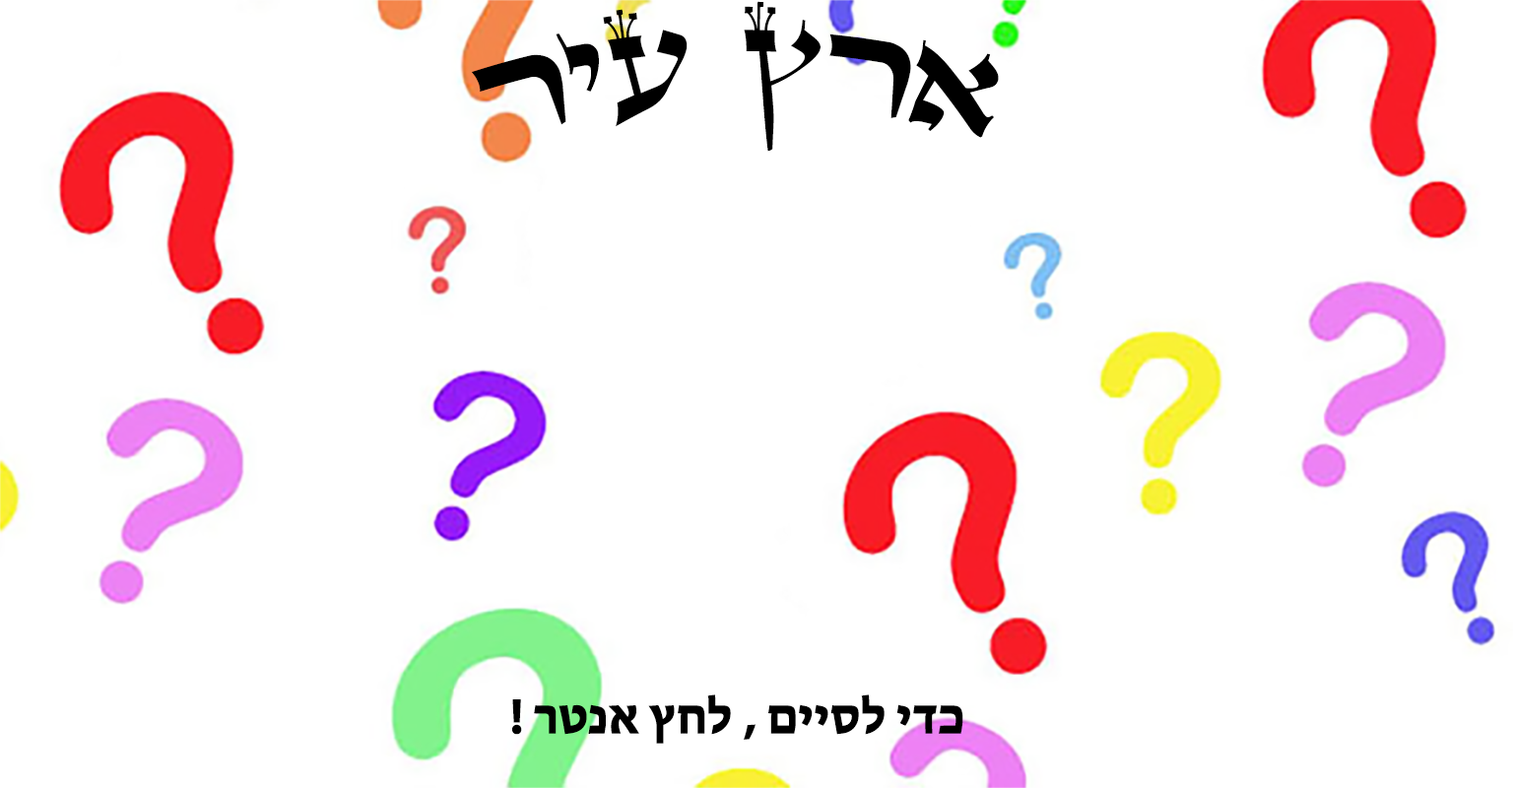
<style>
.page{position:relative;width:1513px;height:788px;background:#ffffff}
.page>*{position:absolute;margin:0}
.t1{font:126.1px "GuttmanStamNormal";color:#000000}
.t2{font:50.4px "MyriadHebrew-Bold";color:#000000}
</style>
<div class="page">
<p class="t1" style="left:472px;top:1px;width:527px;height:151px">ארץ עיר</p>
<p class="t2" style="left:512px;top:694px;width:451px;height:50px">כדי לסיים , לחץ אנטר !</p>
</div>
